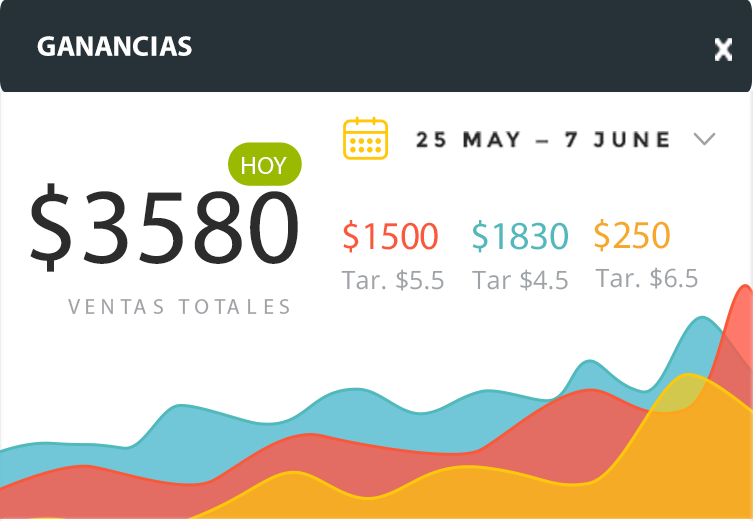
<style>
.page{position:relative;width:753px;height:521px;background:#ffffff}
.page>*{position:absolute;margin:0}
.t1{font:28.7px "MyriadPro-Bold";color:#ffffff}
.t2{font:21.6px "Montserrat-Bold";letter-spacing:0.24em;color:#292929;text-transform:uppercase}
.t3{font:25.2px "MyriadPro-Regular";color:#ffffff;text-transform:uppercase}
.t4{font:107.8px "MyriadPro-Regular";color:#2c2c2c}
.t5{font:39.5px "MyriadPro-Regular";color:#f9593a}
.t6{font:39.5px "MyriadPro-Regular";color:#51b8bb}
.t7{font:39.5px "MyriadPro-Regular";color:#f5a82a}
.t8{font:25.2px "OpenSans";color:#9fa3a7}
.t9{font:21.6px "MyriadPro-Regular";letter-spacing:0.24em;color:#9fa3a7;text-transform:uppercase}
</style>
<div class="page">
<p class="t1" style="left:37px;top:36px;width:155px;height:20px">GANANCIAS</p>
<p class="t2" style="left:415px;top:131px;width:255px;height:18px">25 may — 7 june</p>
<p class="t3" style="left:242px;top:157px;width:45px;height:17px">hoy</p>
<p class="t4" style="left:30px;top:183px;width:268px;height:89px">$3580</p>
<p class="t5" style="left:343px;top:220px;width:95px;height:33px">$1500</p>
<p class="t6" style="left:472px;top:220px;width:96px;height:33px">$1830</p>
<p class="t7" style="left:594px;top:219px;width:76px;height:33px">$250</p>
<p class="t8" style="left:341px;top:269px;width:103px;height:22px">Tar. $5.5</p>
<p class="t8" style="left:472px;top:269px;width:96px;height:22px">Tar $4.5</p>
<p class="t8" style="left:595px;top:267px;width:103px;height:22px">Tar. $6.5</p>
<p class="t9" style="left:68px;top:299px;width:221px;height:15px">ventas totales</p>
</div>
